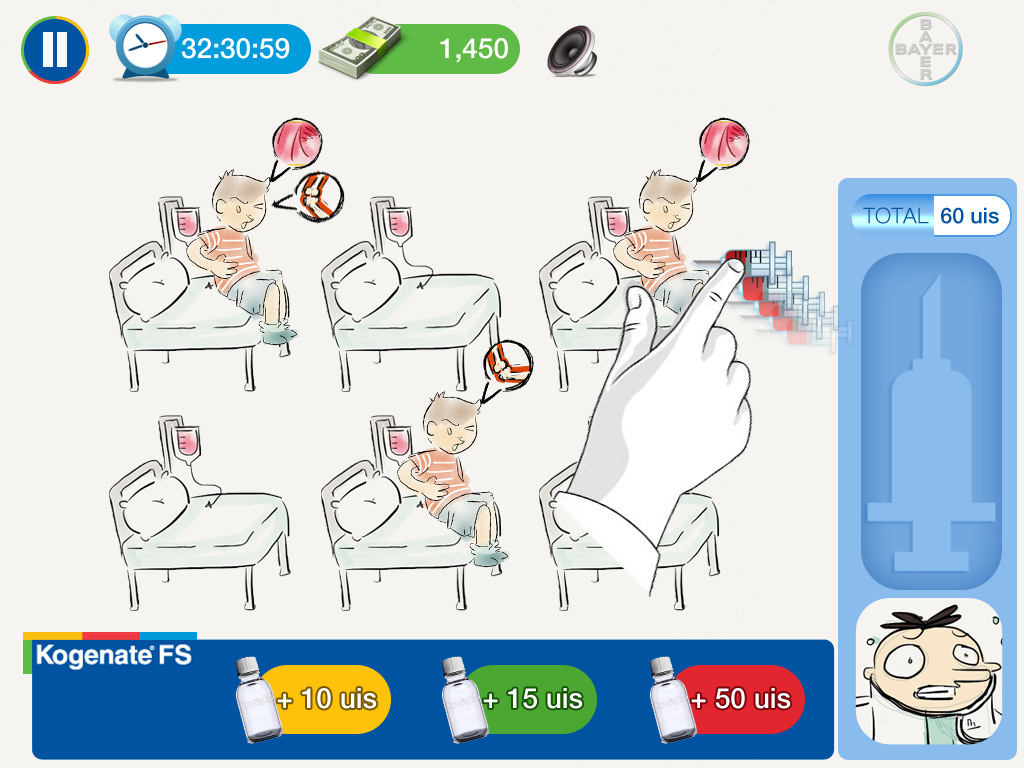
<style>
.page{position:relative;width:1024px;height:768px;background:#f5f4f0}
.page>*{position:absolute;margin:0}
.t1{font:28px "HelveticaNeueLTPro-Md";color:#ffffff}
.t2{font:21.6px "HelveticaNeueLTPro-Md";color:#0053a0}
.t3{font:21.6px "HelveticaNeueLTPro-Lt";color:#0053a0}
</style>
<div class="page">
<p class="t1" style="left:181px;top:38px;width:109px;height:21px">32:30:59</p>
<p class="t1" style="left:440px;top:38px;width:68px;height:25px">1,450</p>
<p class="t2" style="left:863px;top:207px;width:136px;height:17px"><span class="t3">TOTAL  </span>60 uis</p>
<p class="t1" style="left:277px;top:688px;width:100px;height:21px">+ 10 uis</p>
<p class="t1" style="left:483px;top:688px;width:100px;height:21px">+ 15 uis</p>
<p class="t1" style="left:691px;top:688px;width:100px;height:21px">+ 50 uis</p>
</div>
